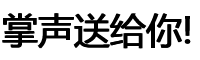
<style>
.page{position:relative;width:200px;height:60px;background:#ffffff}
.page>*{position:absolute;margin:0}
.t1{font:36px "MicrosoftYaHei";color:#000000}
</style>
<div class="page">
<p class="t1" style="left:2px;top:13px;width:188px;height:36px">掌声送给你!</p>
<p class="t1" style="left:3px;top:13px;width:188px;height:36px">掌声送给你!</p>
</div>
